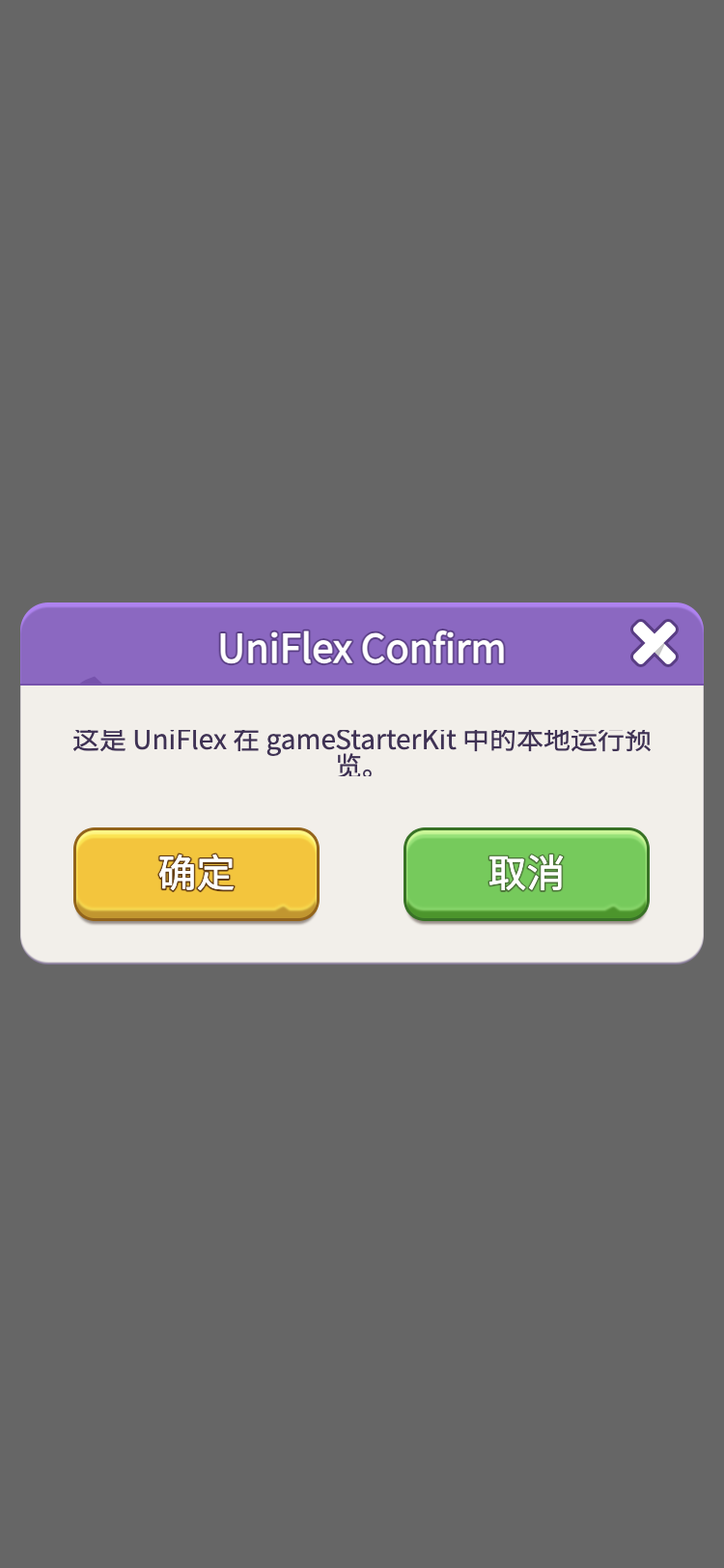
<style>
.page{position:relative;width:724px;height:1568px;background:#666666}
.page>*{position:absolute;margin:0}
.t1{font:38.6px "WebPSD-18463539-0-Regular";color:#ffffff;font-weight:bold}
.t2{font:27px/27px "WebPSD-18463539-0-Regular";color:#3f3254}
</style>
<div class="page">
<p class="t1" style="left:107px;top:620px;width:510px;height:56px">UniFlex Confirm</p>
<p class="t2" style="left:59px;top:730px;width:606px;height:46px;text-align:center">这是 UniFlex 在 gameStarterKit 中的本地运行预<br>览。</p>
</div>
